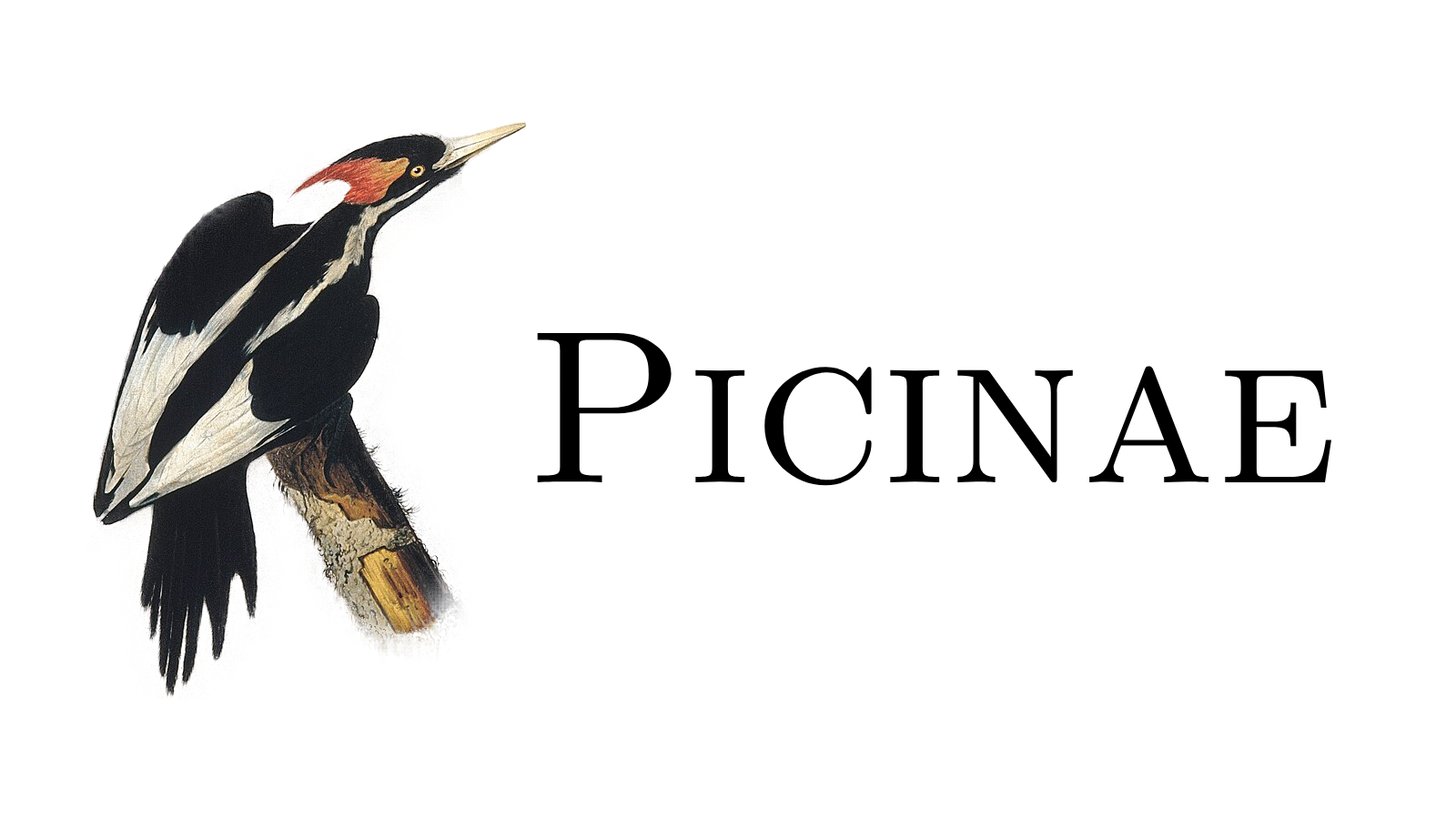
<style>
.page{position:relative;width:1456px;height:819px;background:#ffffff}
.page>*{position:absolute;margin:0}
.t1{font:218.4px "LMRomanCaps10-Regular";color:#000000}
</style>
<div class="page">
<p class="t1" style="left:537px;top:333px;width:794px;height:153px">Picinae</p>
</div>
